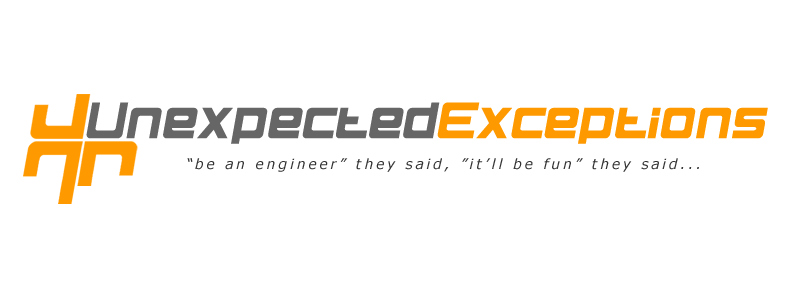
<style>
.page{position:relative;width:800px;height:300px;background:#ffffff}
.page>*{position:absolute;margin:0}
.t1{font:54px "BNElements";color:#666666}
.t2{font:54px "BNElements";color:#ff9900}
.t3{font:14px "Verdana-Italic";letter-spacing:0.2em;color:#333333}
</style>
<div class="page">
<p class="t1" style="left:86px;top:102px;width:682px;height:42px">Unexpected<span class="t2">Exceptions</span></p>
<p class="t3" style="left:187px;top:158px;width:512px;height:14px">“be an engineer” they said, ”it’ll be fun” they said...</p>
</div>
